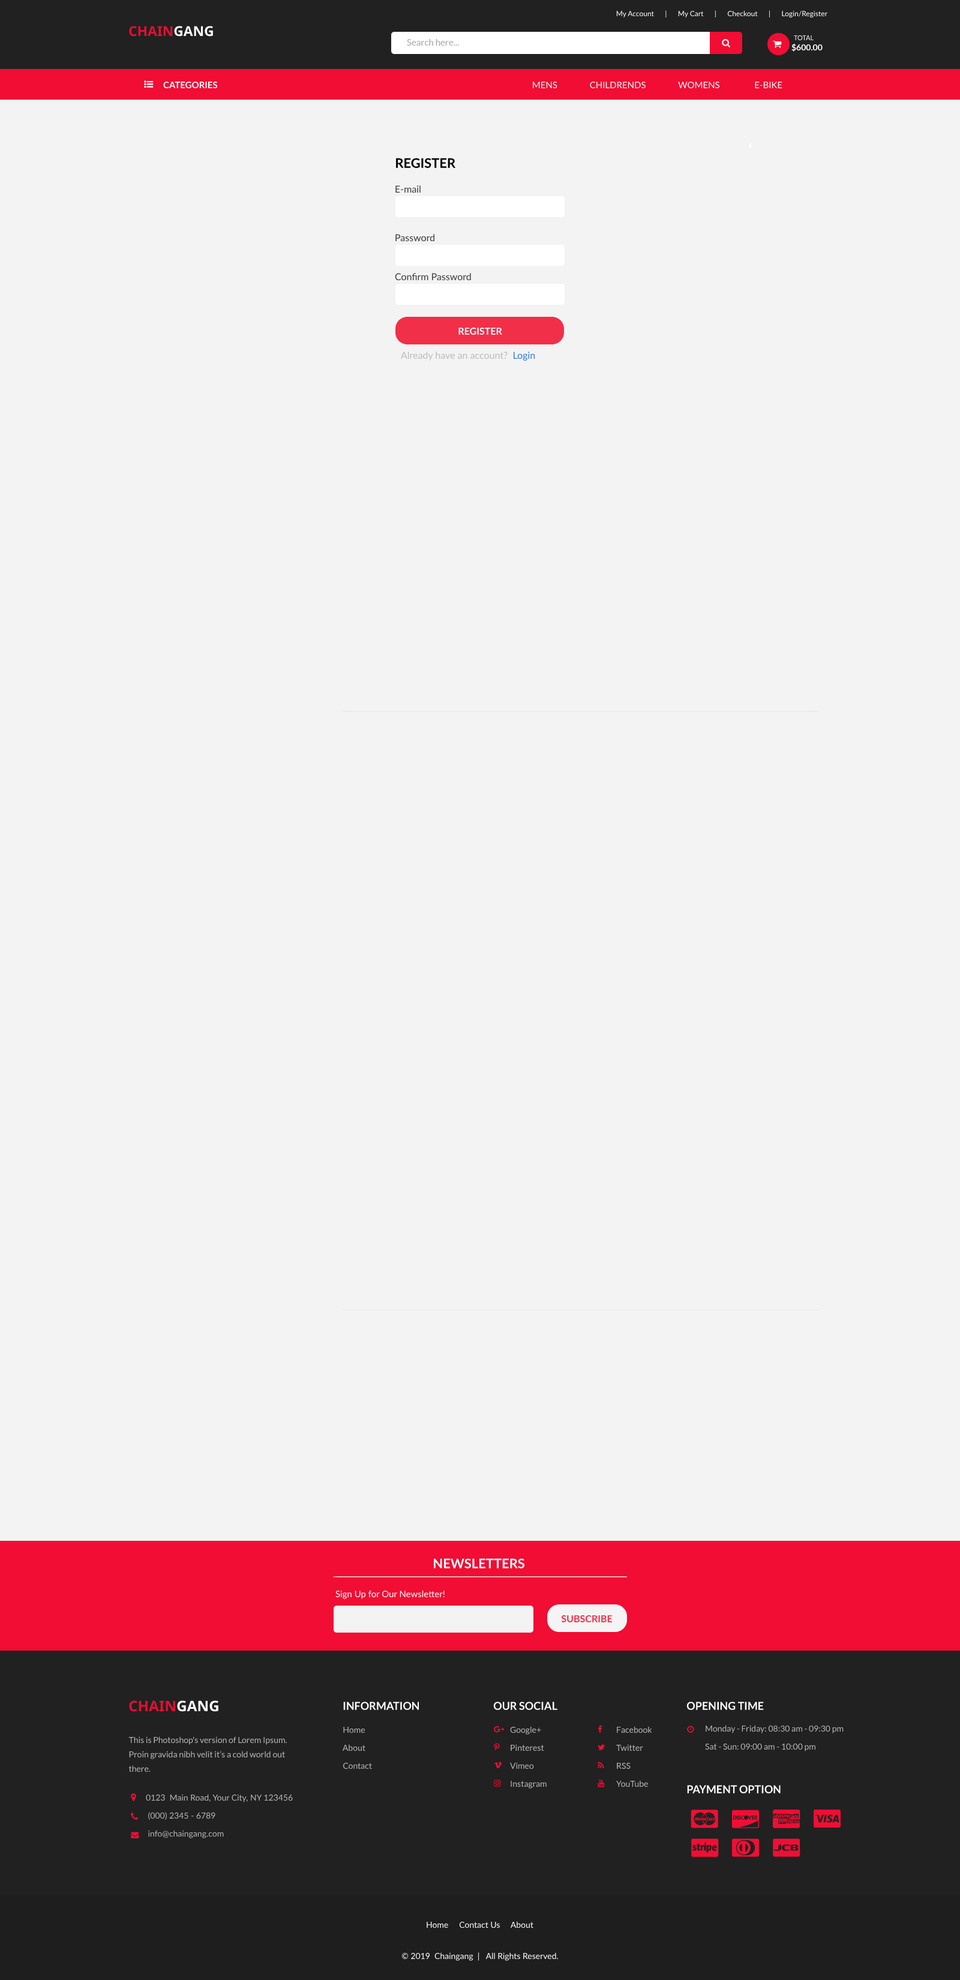
<style>
.page{position:relative;width:960px;height:1980px;background:#f3f3f3}
.page>*{position:absolute;margin:0}
.t1{font:7.2px "Lato-Regular";color:#ffffff}
.t2{font:13.7px "NotoSans-Bold";color:#e40f33}
.t3{font:13.7px "NotoSans-Bold";color:#ffffff}
.t4{font:9px "Lato-Regular";color:#a7a7a7}
.t5{font:6.6px "Lato-Regular";color:#ffffff;text-transform:uppercase}
.t6{font:8.4px "Lato-Bold";color:#ffffff}
.t7{font:9px "Lato-Bold";color:#ffffff;text-transform:uppercase}
.t8{font:9px "Lato-Regular";color:#ffffff;text-transform:uppercase}
.t9{font:13.2px "Lato-Bold";color:#000000;text-transform:uppercase}
.t10{font:9.6px "Lato-Regular";color:#3d3d3d}
.t11{font:9.6px "Lato-Bold";color:#ffffff;text-transform:uppercase}
.t12{font:9.6px "Lato-Regular";color:#bcbcbc}
.t13{font:9.6px "Lato-Regular";color:#377ad7}
.t14{font:13.2px "Lato-Bold";color:#ffffff;text-transform:uppercase}
.t15{font:9px "Lato-Regular";color:#ffffff}
.t16{font:9.6px "Lato-Bold";color:#f12f49;text-transform:uppercase}
.t17{font:14.6px "NotoSans-Bold";color:#e40f33}
.t18{font:14.6px "NotoSans-Bold";color:#ffffff}
.t19{font:10.8px "Lato-Bold";color:#ffffff;text-transform:uppercase}
.t20{font:8.4px/18px "Lato-Regular";color:#b6b6b6}
.t21{font:8.4px/14.4px "Lato-Regular";color:#b6b6b6}
.t22{font:8.4px "Lato-Regular";color:#ffffff}
</style>
<div class="page">
<p class="t1" style="left:616px;top:10px;width:211px;height:8px">My Account      |      My Cart      |      Checkout      |      Login/Register</p>
<p class="t2" style="left:129px;top:26px;width:84px;height:11px">CHAIN<span class="t3">GANG</span></p>
<p class="t4" style="left:407px;top:39px;width:52px;height:7px">Search here...</p>
<p class="t5" style="left:794px;top:35px;width:20px;height:5px">Total</p>
<p class="t6" style="left:791px;top:43px;width:32px;height:9px">$600.00</p>
<p class="t7" style="left:163px;top:81px;width:55px;height:8px">Categories</p>
<p class="t8" style="left:533px;top:82px;width:249px;height:7px">MENS              CHILDRENDS              WOMENS               E-BIKE</p>
<p class="t9" style="left:396px;top:158px;width:60px;height:10px">Register</p>
<p class="t10" style="left:395px;top:185px;width:26px;height:8px">E-mail</p>
<p class="t10" style="left:395px;top:234px;width:39px;height:8px">Password</p>
<p class="t10" style="left:395px;top:273px;width:76px;height:8px">Confirm Password</p>
<p class="t11" style="left:458px;top:328px;width:44px;height:7px">Register</p>
<p class="t12" style="left:401px;top:352px;width:134px;height:9px">Already have an account?  <span class="t13">Login</span></p>
<p class="t14" style="left:434px;top:1558px;width:91px;height:10px">Newsletters</p>
<p class="t15" style="left:335px;top:1590px;width:110px;height:9px">Sign Up for Our Newsletter!</p>
<p class="t16" style="left:561px;top:1615px;width:52px;height:7px">sUBSCRIBE</p>
<p class="t17" style="left:129px;top:1700px;width:89px;height:12px">CHAIN<span class="t18">GANG</span></p>
<p class="t19" style="left:343px;top:1702px;width:76px;height:8px">Information</p>
<p class="t19" style="left:493px;top:1702px;width:64px;height:8px">Our Social</p>
<p class="t19" style="left:686px;top:1702px;width:78px;height:8px">Opening Time</p>
<p class="t20" style="left:342px;top:1726px;width:30px;height:43px">Home<br>    About<br>    Contact</p>
<p class="t20" style="left:510px;top:1726px;width:37px;height:63px">Google+<br>Pinterest<br>Vimeo<br>Instagram</p>
<p class="t20" style="left:616px;top:1726px;width:36px;height:61px">Facebook<br>Twitter<br>RSS<br>YouTube</p>
<p class="t20" style="left:705px;top:1725px;width:139px;height:26px">Monday - Friday: 08:30 am - 09:30 pm<br>Sat - Sun: 09:00 am - 10:00 pm</p>
<p class="t21" style="left:128px;top:1736px;width:159px;height:36px">This is Photoshop's version of Lorem Ipsum. Proin gravida nibh velit it’s a cold world out there.</p>
<p class="t19" style="left:687px;top:1785px;width:94px;height:8px">Payment Option</p>
<p class="t20" style="left:146px;top:1794px;width:147px;height:44px">0123  Main Road, Your City, NY 123456<br> (000) 2345 - 6789<br> info@chaingang.com</p>
<p class="t22" style="left:427px;top:1921px;width:106px;height:7px">Home     Contact Us     About</p>
<p class="t22" style="left:401px;top:1952px;width:158px;height:9px">© 2019  Chaingang  |   All Rights Reserved.</p>
</div>
